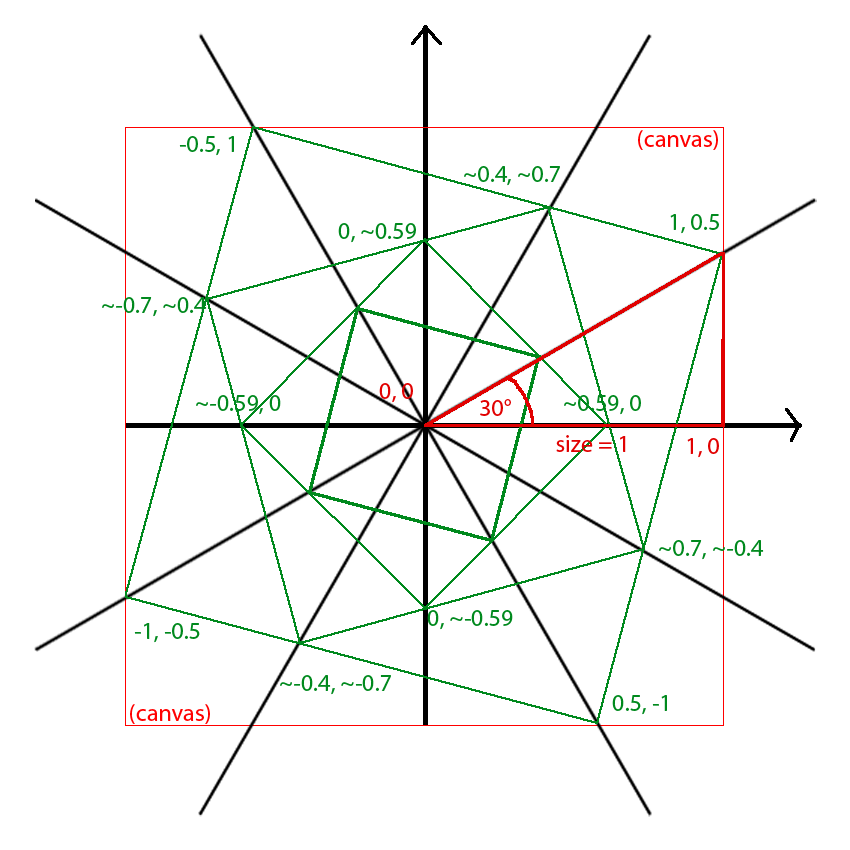
<style>
.page{position:relative;width:850px;height:850px;background:#ffffff}
.page>*{position:absolute;margin:0}
.t1{font:24px "MyriadPro-Regular";color:#00891d}
.t2{font:24px "MyriadPro-Regular";color:#ff0000}
.t3{font:24px "MyriadPro-Regular";color:#e10101}
</style>
<div class="page">
<p class="t1" style="left:179px;top:136px;width:55px;height:20px">-0.5, 1</p>
<p class="t2" style="left:638px;top:130px;width:80px;height:20px">(canvas)</p>
<p class="t1" style="left:464px;top:166px;width:96px;height:20px">~0.4, ~0.7</p>
<p class="t1" style="left:670px;top:214px;width:49px;height:20px">1, 0.5</p>
<p class="t1" style="left:338px;top:223px;width:78px;height:20px">0, ~0.59</p>
<p class="t1" style="left:102px;top:297px;width:105px;height:20px">~-0.7, ~0.4</p>
<p class="t3" style="left:379px;top:383px;width:34px;height:20px">0, 0</p>
<p class="t1" style="left:196px;top:395px;width:85px;height:20px">~-0.59, 0</p>
<p class="t3" style="left:480px;top:399px;width:31px;height:17px">30°</p>
<p class="t1" style="left:564px;top:395px;width:77px;height:20px">~0.59, 0</p>
<p class="t3" style="left:556px;top:435px;width:70px;height:17px">size = 1</p>
<p class="t3" style="left:687px;top:438px;width:32px;height:20px">1, 0</p>
<p class="t1" style="left:659px;top:540px;width:105px;height:20px">~0.7, ~-0.4</p>
<p class="t1" style="left:427px;top:610px;width:86px;height:20px">0, ~-0.59</p>
<p class="t1" style="left:134px;top:623px;width:66px;height:20px">-1, -0.5</p>
<p class="t1" style="left:280px;top:675px;width:111px;height:20px">~-0.4, ~-0.7</p>
<p class="t1" style="left:612px;top:695px;width:55px;height:20px">0.5, -1</p>
<p class="t2" style="left:130px;top:704px;width:80px;height:20px">(canvas)</p>
</div>
